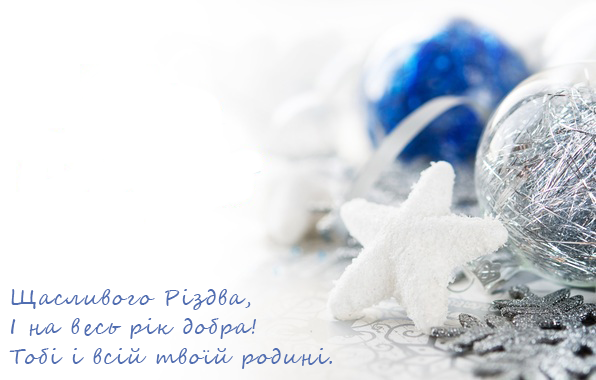
<style>
.page{position:relative;width:596px;height:380px;background:#ffffff}
.page>*{position:absolute;margin:0}
.t1{font:20.8px/29.2px "SegoeScript";letter-spacing:0.08em;color:#506eb2}
</style>
<div class="page">
<p class="t1" style="left:9px;top:289px;width:323px;height:80px">Щасливого Різдва, <br>І на весь pік добра! <br>Тобі і всій твоїй родині.</p>
</div>
